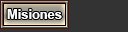
<style>
.page{position:relative;width:128px;height:32px;background:#333333}
.page>*{position:absolute;margin:0}
.t1{font:22px "Arial-BoldMT";color:#ffffff}
</style>
<div class="page">
<p class="t1" style="left:7px;top:9px;width:55px;height:10px">Misiones</p>
<p class="t1" style="left:7px;top:9px;width:55px;height:10px">Misiones</p>
</div>
